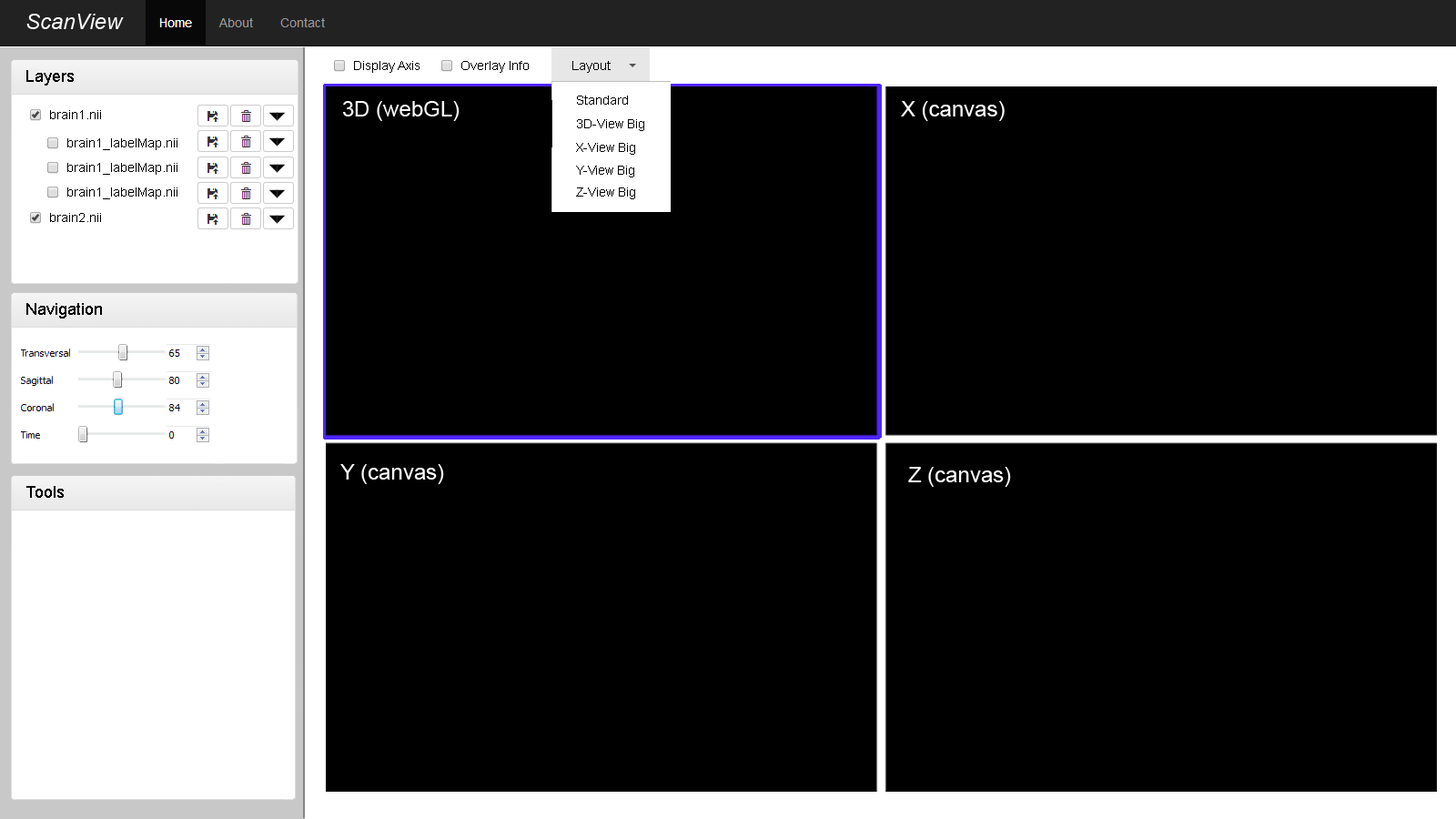
<style>
.page{position:relative;width:1456px;height:819px;background:#000000}
.page>*{position:absolute;margin:0}
.t1{font:21.8px "Arial-ItalicMT";color:#ffffff}
.t2{font:12.7px "ArialMT";color:#000000}
.t3{font:16.4px "ArialMT";color:#000000}
.t4{font:21.8px "ArialMT";color:#ffffff}
</style>
<div class="page">
<p class="t1" style="left:26px;top:14px;width:98px;height:15px">ScanView</p>
<p class="t2" style="left:354px;top:61px;width:66px;height:12px">Display Axis</p>
<p class="t2" style="left:461px;top:61px;width:68px;height:12px">Overlay Info</p>
<p class="t2" style="left:572px;top:61px;width:39px;height:12px">Layout</p>
<p class="t3" style="left:26px;top:70px;width:48px;height:16px">Layers</p>
<p class="t4" style="left:343px;top:101px;width:117px;height:20px">3D (webGL)</p>
<p class="t2" style="left:577px;top:96px;width:51px;height:9px">Standard</p>
<p class="t4" style="left:901px;top:101px;width:104px;height:20px">X (canvas)</p>
<p class="t2" style="left:50px;top:110px;width:51px;height:9px">brain1.nii</p>
<p class="t2" style="left:577px;top:119px;width:67px;height:12px">3D-View Big</p>
<p class="t2" style="left:67px;top:138px;width:110px;height:12px">brain1_labelMap.nii</p>
<p class="t2" style="left:576px;top:143px;width:59px;height:12px">X-View Big</p>
<p class="t2" style="left:67px;top:163px;width:110px;height:12px">brain1_labelMap.nii</p>
<p class="t2" style="left:576px;top:166px;width:58px;height:11px">Y-View Big</p>
<p class="t2" style="left:67px;top:187px;width:110px;height:12px">brain1_labelMap.nii</p>
<p class="t2" style="left:576px;top:187px;width:59px;height:12px">Z-View Big</p>
<p class="t2" style="left:50px;top:213px;width:51px;height:9px">brain2.nii</p>
<p class="t3" style="left:26px;top:303px;width:76px;height:15px">Navigation</p>
<p class="t4" style="left:340px;top:464px;width:104px;height:20px">Y (canvas)</p>
<p class="t4" style="left:908px;top:467px;width:103px;height:20px">Z (canvas)</p>
<p class="t3" style="left:26px;top:486px;width:38px;height:12px">Tools</p>
</div>
